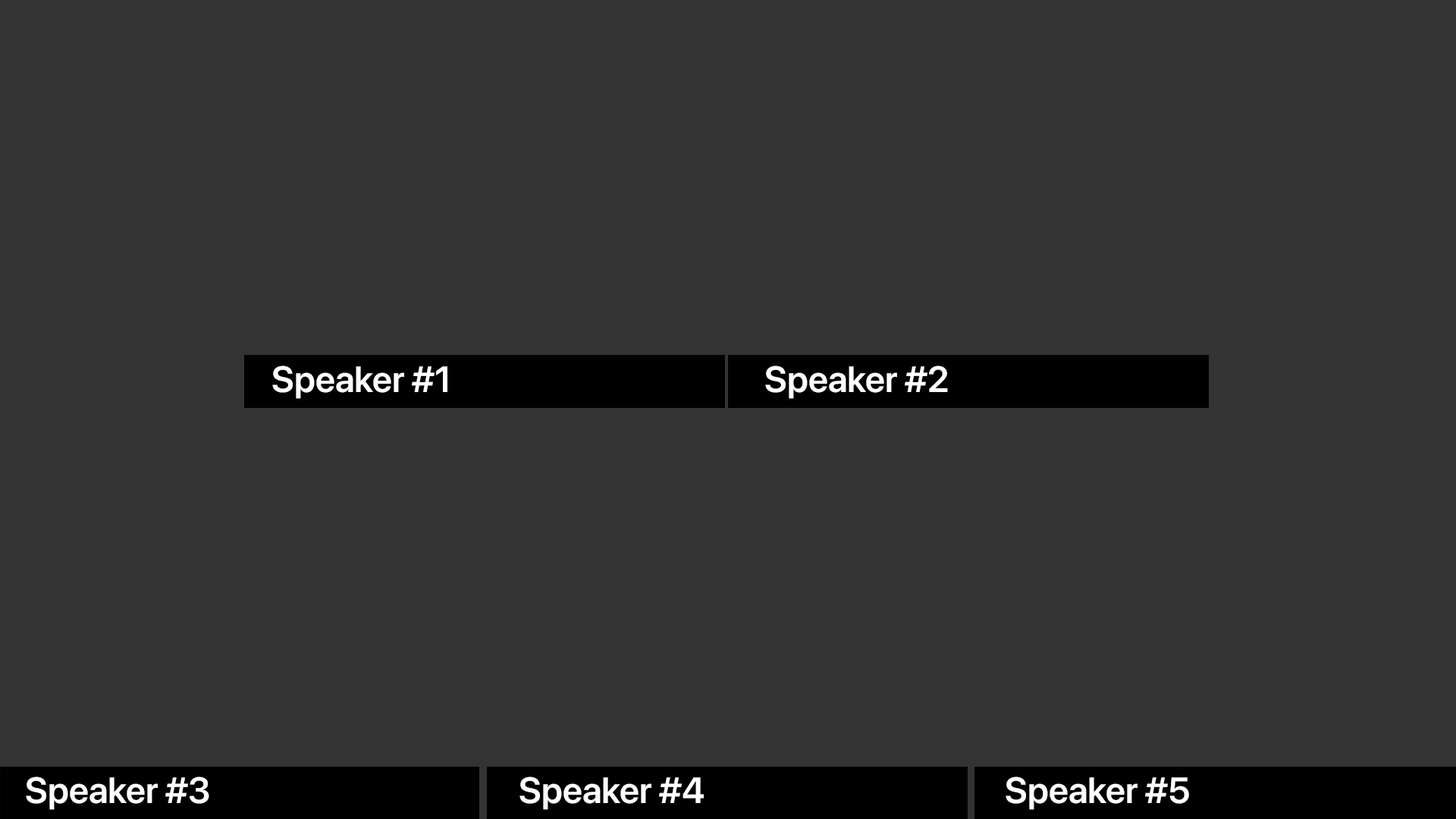
<style>
.page{position:relative;width:1456px;height:819px;background:#333333}
.page>*{position:absolute;margin:0}
.t1{font:36.4px "SFProDisplay-Semibold";color:#ffffff}
</style>
<div class="page">
<p class="t1" style="left:272px;top:366px;width:175px;height:33px">Speaker #1</p>
<p class="t1" style="left:765px;top:366px;width:183px;height:33px">Speaker #2</p>
<p class="t1" style="left:26px;top:777px;width:183px;height:33px">Speaker #3</p>
<p class="t1" style="left:519px;top:777px;width:185px;height:33px">Speaker #4</p>
<p class="t1" style="left:1006px;top:777px;width:183px;height:33px">Speaker #5</p>
</div>
